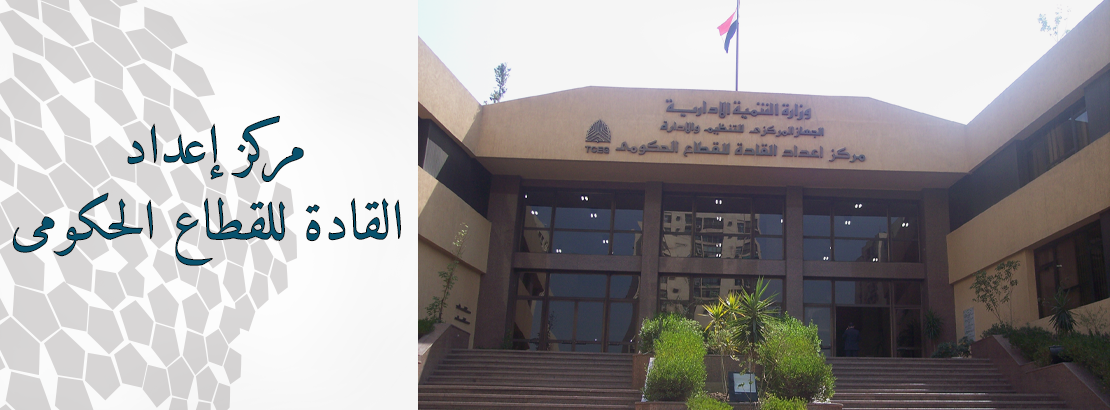
<style>
.page{position:relative;width:1110px;height:410px}
.page>*{position:absolute;margin:0}
.t1{font:55.4px/76.4px "Amiri-Bold"}
</style>
<div class="page">
<p class="t1" style="left:12px;top:115px;width:389px;height:151px">مركز إعداد<br> القادة للقطاع الحكومى</p>
</div>
